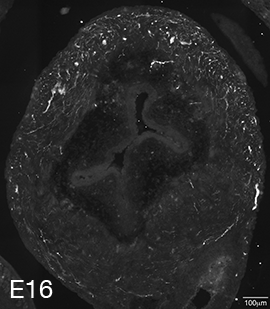
<style>
.page{position:relative;width:270px;height:309px}
.page>*{position:absolute;margin:0}
.t1{font:25.4px "HelveticaNeue";color:#ffffff}
</style>
<div class="page">
<p class="t1" style="left:10px;top:280px;width:43px;height:18px">E16</p>
</div>
